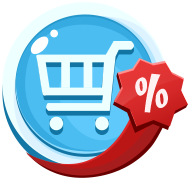
<style>
.page{position:relative;width:190px;height:180px;background:#ffffff}
.page>*{position:absolute;margin:0}
.t1{font:40.1px "v_CCZoinks";color:#fff1f1}
</style>
<div class="page">
<p class="t1" style="left:135px;top:73px;width:33px;height:40px;rotate:-22deg">%</p>
</div>
